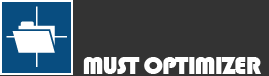
<style>
.page{position:relative;width:269px;height:76px;background:#333333}
.page>*{position:absolute;margin:0}
.t1{font:26.4px "Bauhaus93";letter-spacing:-0.055em;color:#ffffff}
</style>
<div class="page">
<p class="t1" style="left:83px;top:57px;width:178px;height:17px">MUST OPTIMIZER</p>
</div>
